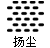
<style>
.page{position:relative;width:50px;height:48px;background:#ffffff}
.page>*{position:absolute;margin:0}
.t1{font:12px "OPPOSans-R";color:#000000}
</style>
<div class="page">
<p class="t1" style="left:13px;top:36px;width:23px;height:11px">扬尘</p>
</div>
